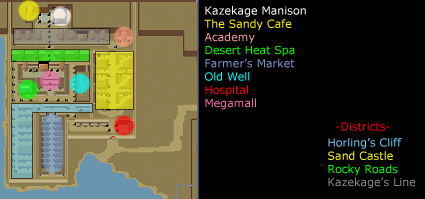
<style>
.page{position:relative;width:425px;height:199px;background:#000000}
.page>*{position:absolute;margin:0}
.t1{font:11px "Verdana";color:#ffffff}
.t2{font:11px "Verdana";color:#fff200}
.t3{font:11px "Verdana";color:#f5989d}
.t4{font:11px "Verdana";color:#00ff00}
.t5{font:11px "Verdana";color:#8393ca}
.t6{font:11px "Verdana";color:#00ffff}
.t7{font:11px "Verdana";color:#ff0000}
.t8{font:11px "Verdana";color:#f06eaa}
.t9{font:11px "Verdana";color:#6dcff6}
.t10{font:11px "Verdana";color:#ffff00}
.t11{font:11px "Verdana";color:#898989}
</style>
<div class="page">
<p class="t1" style="left:204px;top:6px;width:102px;height:104px">Kazekage Manison<br><span class="t2">The Sandy Cafe<br></span><span class="t3">Academy<br></span><span class="t4">Desert Heat Spa<br></span><span class="t5">Farmer’s Market<br></span><span class="t6">Old Well<br></span><span class="t7">Hospital<br></span><span class="t8">Megamall</span></p>
<p class="t7" style="left:336px;top:122px;width:54px;height:9px">-Districts-</p>
<p class="t9" style="left:328px;top:138px;width:88px;height:51px">Horling’s Cliff<br><span class="t10">Sand Castle<br></span><span class="t4">Rocky Roads<br></span><span class="t11">Kazekage’s Line</span></p>
</div>
